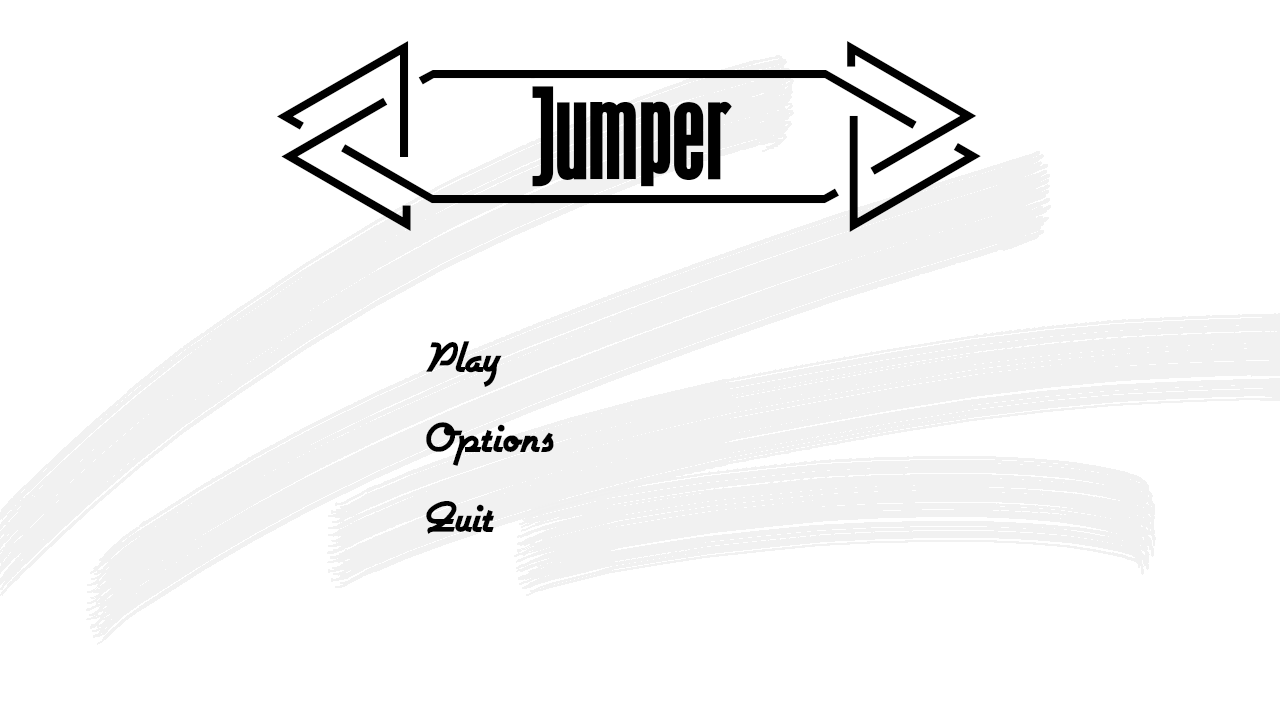
<style>
.page{position:relative;width:1280px;height:720px;background:#ffffff}
.page>*{position:absolute;margin:0}
.t1{font:160px "TheTribalBox";color:#000000}
.t2{font:50px "Airstream";color:#000000}
</style>
<div class="page">
<p class="t1" style="left:277px;top:41px;width:704px;height:191px">&lt;Jumper&gt;</p>
<p class="t2" style="left:426px;top:341px;width:76px;height:46px">Play</p>
<p class="t2" style="left:426px;top:422px;width:128px;height:44px">Options</p>
<p class="t2" style="left:426px;top:501px;width:68px;height:33px">Quit</p>
</div>
